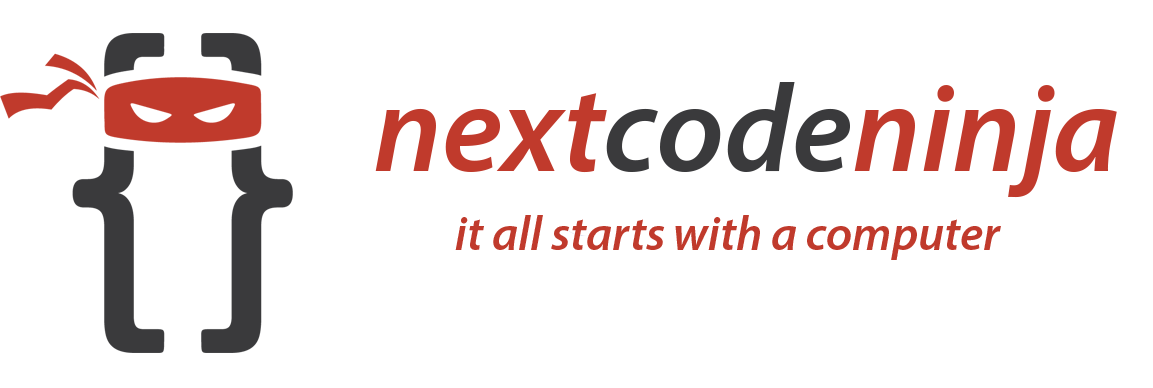
<style>
.page{position:relative;width:1153px;height:388px;background:#ffffff}
.page>*{position:absolute;margin:0}
.t1{font:125px "MyriadPro-SemiboldIt";color:#c03a2c}
.t2{font:125px "MyriadPro-SemiboldIt";color:#3a3a3c}
.t3{font:48px "MyriadPro-SemiboldIt";color:#c03a2c}
</style>
<div class="page">
<p class="t1" style="left:375px;top:82px;width:742px;height:116px">next<span class="t2">code</span>ninja</p>
<p class="t3" style="left:455px;top:215px;width:546px;height:45px">it all starts with a computer</p>
</div>
